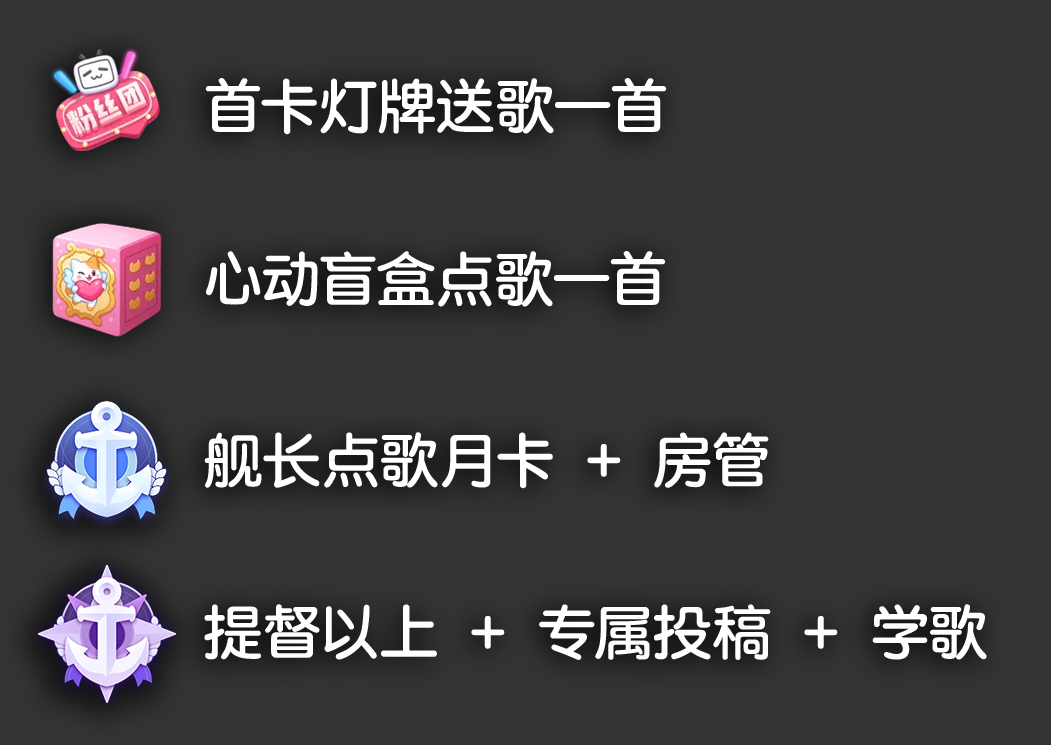
<style>
.page{position:relative;width:1051px;height:745px;background:#333333}
.page>*{position:absolute;margin:0}
.t1{font:60px "Tensentype-JiaLiDaYuanJ";color:#ffffff}
</style>
<div class="page">
<p class="t1" style="left:205px;top:78px;width:462px;height:57px">首卡灯牌送歌一首</p>
<p class="t1" style="left:206px;top:251px;width:460px;height:56px">心动盲盒点歌一首</p>
<p class="t1" style="left:204px;top:432px;width:565px;height:57px">舰长点歌月卡 + 房管</p>
<p class="t1" style="left:204px;top:604px;width:783px;height:56px">提督以上 + 专属投稿 + 学歌</p>
</div>
